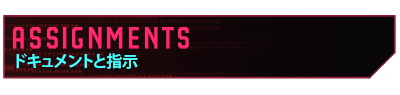
<style>
.page{position:relative;width:400px;height:95px;background:#ffffff}
.page>*{position:absolute;margin:0}
.t1{font:52.5px "Party-Lights-[WLM]-Flat";color:#ff296d}
.t2{font:15.7px "KozGoPr6N-Bold";color:#43ffff}
</style>
<div class="page">
<p class="t1" style="left:13px;top:27px;width:176px;height:22px">Assignments</p>
<p class="t2" style="left:16px;top:53px;width:122px;height:16px">ドキュメントと指示</p>
</div>
